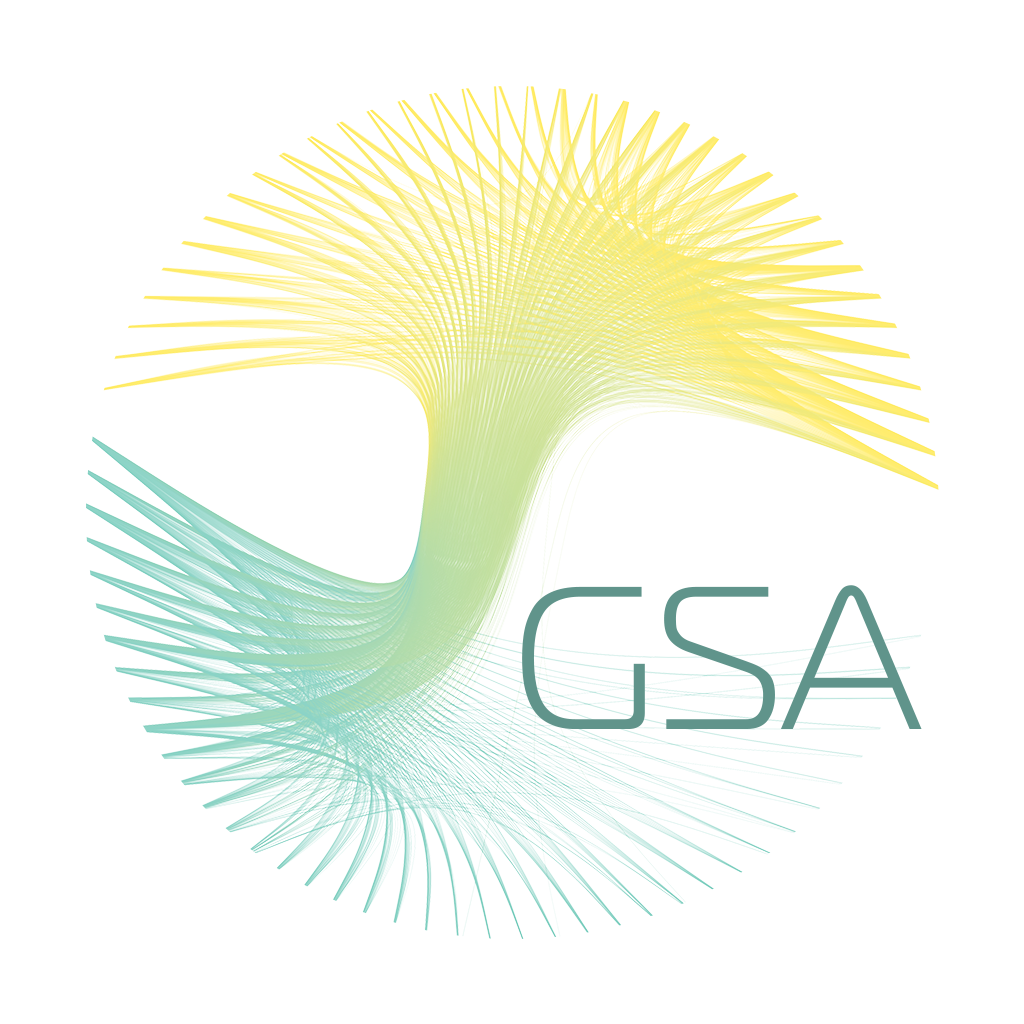
<style>
.page{position:relative;width:1024px;height:1024px;background:#ffffff}
.page>*{position:absolute;margin:0}
.t1{font:203.4px "Magistral-Light";color:#60948b}
</style>
<div class="page">
<p class="t1" style="left:522px;top:585px;width:400px;height:144px">GSA</p>
</div>
